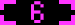
<style>
.page{position:relative;width:75px;height:25px;background:#000000}
.page>*{position:absolute;margin:0}
.t1{font:50px "Thintel";color:#ff35ff}
</style>
<div class="page">
<p class="t1" style="left:31px;top:1px;width:13px;height:22px">6</p>
</div>
